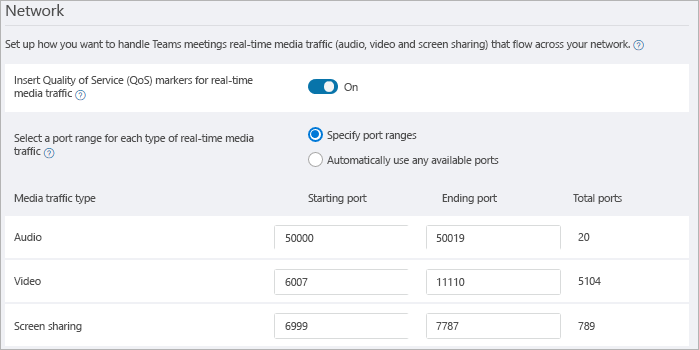
<style>
.page{position:relative;width:699px;height:350px;background:#f0f1f5}
.page>*{position:absolute;margin:0}
.t1{font:15.7px "SegoeUI";color:#505050}
.t2{font:10.5px "SegoeUI";color:#505050}
</style>
<div class="page">
<p class="t1" style="left:6px;top:4px;width:58px;height:12px">Network</p>
<p class="t2" style="left:5px;top:40px;width:625px;height:10px">Set up how you want to handle Teams meetings real-time media traffic (audio, video and screen sharing) that flow across your network.</p>
<p class="t2" style="left:14px;top:76px;width:239px;height:21px">Insert Quality of Service (QoS) markers for real-time<br>media traffic</p>
<p class="t2" style="left:344px;top:83px;width:14px;height:8px">On</p>
<p class="t2" style="left:14px;top:134px;width:240px;height:21px">Select a port range for each type of real-time media<br>traffic</p>
<p class="t2" style="left:327px;top:131px;width:90px;height:10px">Specify port ranges</p>
<p class="t2" style="left:327px;top:156px;width:172px;height:10px">Automatically use any available ports</p>
<p class="t2" style="left:14px;top:194px;width:82px;height:10px">Media traffic type</p>
<p class="t2" style="left:308px;top:194px;width:59px;height:10px">Starting port</p>
<p class="t2" style="left:442px;top:194px;width:55px;height:10px">Ending port</p>
<p class="t2" style="left:573px;top:194px;width:49px;height:10px">Total ports</p>
<p class="t2" style="left:14px;top:233px;width:28px;height:8px">Audio</p>
<p class="t2" style="left:578px;top:233px;width:12px;height:8px">20</p>
<p class="t2" style="left:285px;top:234px;width:29px;height:8px">50000</p>
<p class="t2" style="left:436px;top:234px;width:29px;height:8px">50019</p>
<p class="t2" style="left:14px;top:277px;width:27px;height:8px">Video</p>
<p class="t2" style="left:285px;top:278px;width:23px;height:8px">6007</p>
<p class="t2" style="left:437px;top:278px;width:28px;height:8px">11110</p>
<p class="t2" style="left:578px;top:277px;width:23px;height:8px">5104</p>
<p class="t2" style="left:14px;top:322px;width:68px;height:10px">Screen sharing</p>
<p class="t2" style="left:285px;top:322px;width:23px;height:8px">6999</p>
<p class="t2" style="left:436px;top:322px;width:23px;height:8px">7787</p>
<p class="t2" style="left:578px;top:322px;width:17px;height:8px">789</p>
</div>
